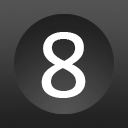
<style>
.page{position:relative;width:128px;height:128px}
.page>*{position:absolute;margin:0}
.t1{font:100px "Consolas";color:#ffffff}
</style>
<div class="page">
<p class="t1" style="left:41px;top:32px;width:45px;height:66px">8</p>
</div>
